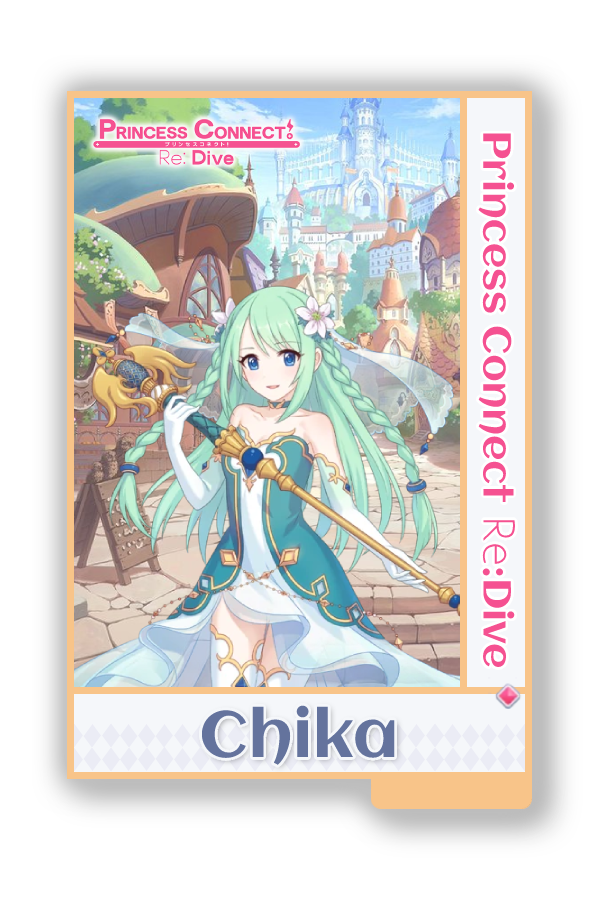
<style>
.page{position:relative;width:600px;height:900px;background:#ffffff}
.page>*{position:absolute;margin:0}
.t1{font:39px "Aclonica-Regular";color:#f55191}
.t2{font:39px "AaarghNormal";color:#f55191}
.t3{font:65px "Aclonica-Regular";color:#64739d}
</style>
<div class="page">
<p class="t1" style="left:478px;top:133px;width:38px;height:534px;rotate:90deg">Princess Connect <span class="t2">Re</span>:Dive</p>
<p class="t3" style="left:201px;top:705px;width:194px;height:60px">Chika</p>
</div>
